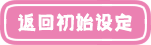
<style>
.page{position:relative;width:151px;height:45px;background:#eb81b2}
.page>*{position:absolute;margin:0}
.t1{font:12px "shetumodengxiaofangti";color:#ffffff;font-weight:bold;scale:0.94 1}
</style>
<div class="page">
<p class="t1" style="left:18px;top:13px;width:114px;height:19px">返回初始设定</p>
</div>
